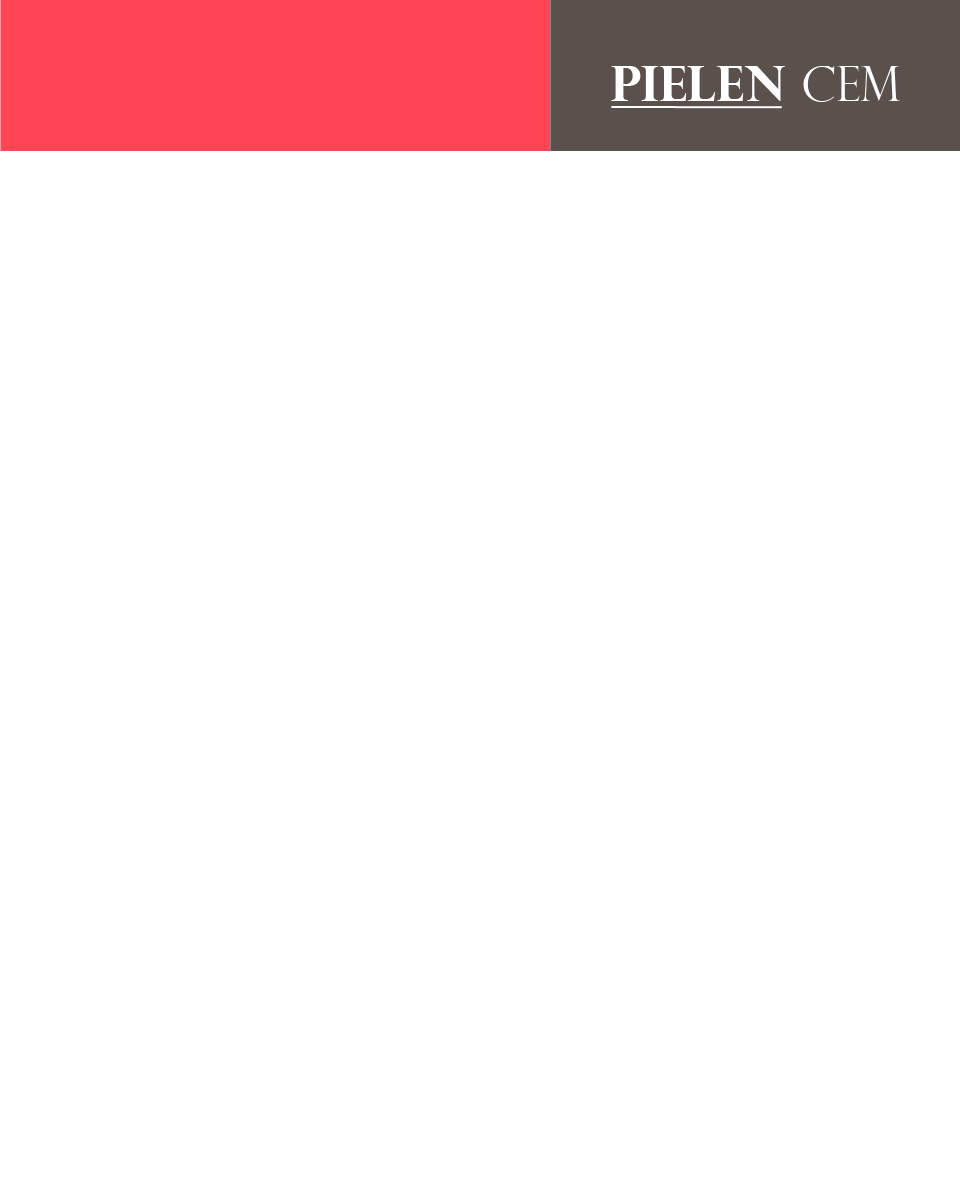
<style>
.page{position:relative;width:960px;height:1200px;background:#ffffff}
.page>*{position:absolute;margin:0}
.t1{font:48px "PerpetuaTitlingMT-Bold";color:#ffffff}
.t2{font:48px "PerpetuaTitlingMT-Light";color:#ffffff}
</style>
<div class="page">
<p class="t1" style="left:611px;top:66px;width:289px;height:36px">PIELEN <span class="t2">CEM</span></p>
</div>
